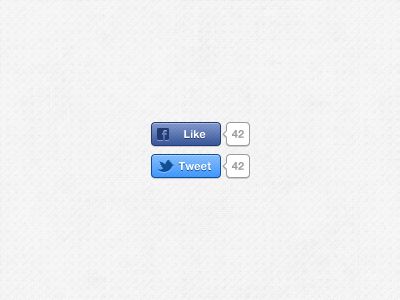
<style>
.page{position:relative;width:400px;height:300px}
.page>*{position:absolute;margin:0}
.t1{font:11px "HelveticaNeue-Bold";letter-spacing:0.01em;color:#ffffff}
.t2{font:11px "HelveticaNeue-Bold";letter-spacing:0.01em;color:#9b9b9b}
</style>
<div class="page">
<p class="t1" style="left:184px;top:130px;width:22px;height:9px">Like</p>
<p class="t2" style="left:232px;top:130px;width:12px;height:8px">42</p>
<p class="t1" style="left:178px;top:162px;width:33px;height:9px">Tweet</p>
<p class="t2" style="left:232px;top:162px;width:12px;height:8px">42</p>
</div>
